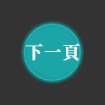
<style>
.page{position:relative;width:105px;height:105px;background:#333333}
.page>*{position:absolute;margin:0}
.t1{font:18px "RyuminPr6N-ExBold";color:#eef6f5;font-weight:bold}
</style>
<div class="page">
<p class="t1" style="left:26px;top:43px;width:54px;height:18px">下一頁</p>
</div>
